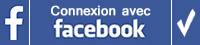
<style>
.page{position:relative;width:200px;height:45px;background:#3b5998}
.page>*{position:absolute;margin:0}
.t1{font:14px "Shruti";color:#ffffff;font-weight:bold}
</style>
<div class="page">
<p class="t1" style="left:51px;top:5px;width:100px;height:11px">Connexion avec</p>
</div>
